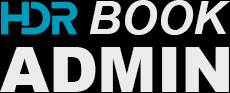
<style>
.page{position:relative;width:230px;height:93px;background:#000000}
.page>*{position:absolute;margin:0}
.t1{font:46px "Arial-BoldItalicMT";color:#ebebeb;text-transform:uppercase}
.t2{font:62.8px "Arial-Black";color:#ebebeb;text-transform:uppercase}
</style>
<div class="page">
<p class="t1" style="left:89px;top:0px;width:141px;height:35px">BOOK</p>
<p class="t2" style="left:0px;top:47px;width:229px;height:45px">ADMIN</p>
</div>
